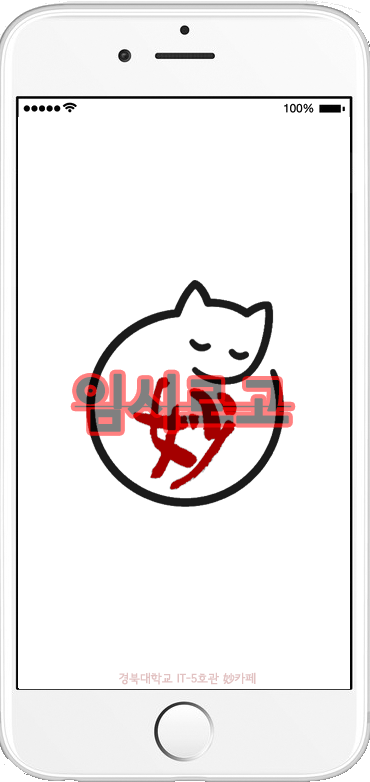
<style>
.page{position:relative;width:370px;height:782px;background:#ffffff}
.page>*{position:absolute;margin:0}
.t1{font:60px "SeoulNamsanEB";font-weight:bold}
.t2{font:12px "SeoulNamsanB";color:#e2c2c2}
</style>
<div class="page">
<p class="t1" style="left:74px;top:373px;width:218px;height:59px">임시로고</p>
<p class="t2" style="left:119px;top:672px;width:137px;height:13px">경북대학교 IT-5호관 妙카페</p>
</div>
